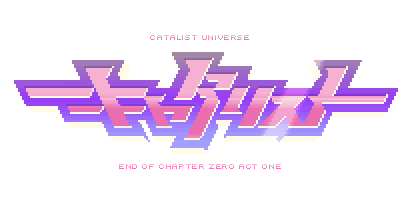
<style>
.page{position:relative;width:414px;height:202px;background:#ffffff}
.page>*{position:absolute;margin:0}
.t1{font:8px "Uni0554";letter-spacing:-0.05em}
</style>
<div class="page">
<p class="t1" style="left:150px;top:35px;width:99px;height:5px">CATALIST UNIVERSE</p>
<p class="t1" style="left:119px;top:164px;width:162px;height:5px">END OF CHAPTER ZERO ACT ONE</p>
</div>
